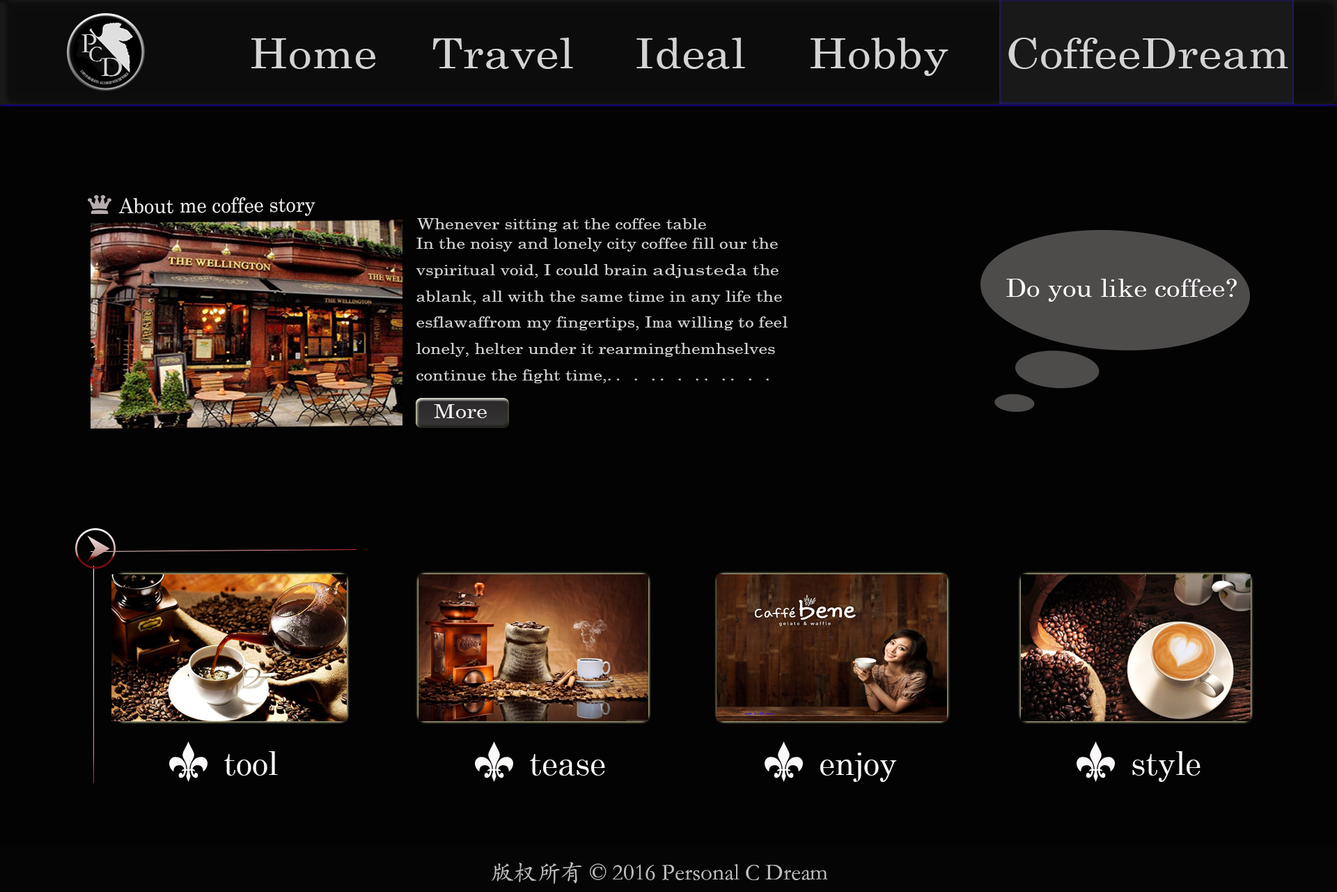
<style>
.page{position:relative;width:1337px;height:892px;background:#030303}
.page>*{position:absolute;margin:0}
.t1{font:28.8px "STKaiti";color:#d4d2d2}
.t2{font:41.6px "CenturySchoolbook";color:#d4d2d2;scale:1.13 1}
.t3{font:22.4px "STKaiti";color:#d4d2d2}
.t4{font:20.5px "CenturySchoolbook";color:#f3eeee;scale:0.96 1}
.t5{font:15px "CenturySchoolbook";color:#d4d2d2;scale:1.17 1}
.t6{font:15px "CenturySchoolbook";color:#d4d2d2;scale:1.41 1}
.t7{font:15px "CenturySchoolbook";color:#d4d2d2;scale:0.94 1}
.t8{font:15px "SimSun";color:#d4d2d2;scale:1.17 1}
.t9{font:24.8px "CenturySchoolbook";color:#fcfafa;scale:1.1 1}
.t10{font:19.3px "CenturySchoolbook";color:#faf5f5;scale:1.17 1}
.t11{font:31.9px "CenturySchoolbook";color:#fcfafa}
.t12{font:23.2px "STKaiti";color:#d4d2d2}
</style>
<div class="page">
<p class="t1" style="left:81px;top:34px;width:16px;height:19px">P</p>
<p class="t2" style="left:251px;top:38px;width:125px;height:31px">Home</p>
<p class="t2" style="left:433px;top:38px;width:140px;height:31px">Travel</p>
<p class="t2" style="left:637px;top:38px;width:108px;height:31px">Ideal</p>
<p class="t2" style="left:811px;top:38px;width:138px;height:38px">Hobby</p>
<p class="t2" style="left:1009px;top:38px;width:280px;height:31px">CoffeeDream</p>
<p class="t3" style="left:89px;top:47px;width:13px;height:15px">C</p>
<p class="t1" style="left:101px;top:58px;width:21px;height:19px">D</p>
<p class="t4" style="left:118px;top:197px;width:198px;height:19px;rotate:-1deg">About me coffee story</p>
<p class="t5" style="left:417px;top:218px;width:289px;height:14px">Whenever sitting at the coffee table</p>
<p class="t5" style="left:416px;top:238px;width:372px;height:145px">In the noisy and lonely city coffee fill our the vspiritual void, I could brain <span class="t6">adjusteda</span> the ablank, all with the same time in any life the esflawaffrom my fingertips, I<span class="t7">ma</span> willing to feel lonely, helter under it rearmingthemhselves continue the fight time,<span class="t8">.. . .. . .. .. . .</span></p>
<p class="t9" style="left:1007px;top:279px;width:230px;height:23px">Do you like coffee?</p>
<p class="t10" style="left:434px;top:404px;width:53px;height:14px">More</p>
<p class="t11" style="left:224px;top:751px;width:54px;height:24px">tool</p>
<p class="t11" style="left:530px;top:754px;width:75px;height:21px">tease</p>
<p class="t11" style="left:821px;top:752px;width:76px;height:30px">enjoy</p>
<p class="t11" style="left:1133px;top:751px;width:68px;height:31px">style</p>
<p class="t12" style="left:492px;top:862px;width:336px;height:22px">版权所有 © 2016 Personal C Dream</p>
</div>
